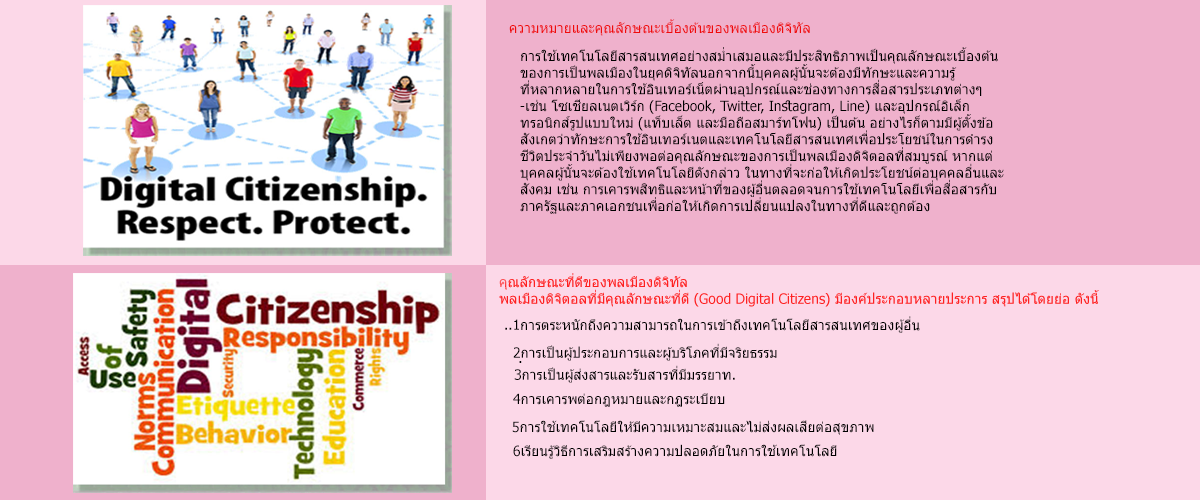
<style>
.page{position:relative;width:1200px;height:500px;background:#efb1cc}
.page>*{position:absolute;margin:0}
.t1{font:13.9px "Tahoma";color:#ef0c0c}
.t2{font:13.9px "Tahoma";color:#000000}
</style>
<div class="page">
<p class="t1" style="left:509px;top:19px;width:301px;height:17px">ความหมายและคุณลักษณะเบื้องต้นของพลเมืองดิจิทัล</p>
<p class="t2" style="left:520px;top:47px;width:484px;height:167px;text-align:right">การใช้เทคโนโลยีสารสนเทศอย่างสม่ำเสมอและมีประสิทธิภาพเป็นคุณลักษณะเบื้องต้น<br>ของการเป็นพลเมืองในยุคดิจิทัลนอกจากนี้บุคคลผู้นั้นจะต้องมีทักษะและความรู้<br>ที่หลากหลายในการใช้อินเทอร์เน็ตผ่านอุปกรณ์และช่องทางการสื่อสารประเภทต่างๆ<br> เช่น โซเชียลเนตเวิร์ก (Facebook, Twitter, Instagram, Line) และอุปกรณ์อิเล็ก-<br>ทรอนิกส์รูปแบบใหม่ (แท็บเล็ต และมือถือสมาร์ทโฟน) เป็นต้น อย่างไรก็ตามมีผู้ตั้งข้อ<br>สังเกตว่าทักษะการใช้อินเทอร์เนตและเทคโนโลยีสารสนเทศเพื่อประโยชน์ในการดำรง<br>ชีวิตประจำวันไม่เพียงพอต่อคุณลักษณะของการเป็นพลเมืองดิจิตอลที่สมบูรณ์ หากแต่<br>บุคคลผู้นั้นจะต้องใช้เทคโนโลยีดังกล่าว ในทางที่จะก่อให้เกิดประโยชน์ต่อบุคคลอื่นและ<br>สังคม เช่น การเคารพสิทธิและหน้าที่ของผู้อื่นตลอดจนการใช้เทคโนโลยีเพื่อสื่อสารกับ<br>ภาครัฐและภาคเอกชนเพื่อก่อให้เกิดการเปลี่ยนแปลงในทางที่ดีและถูกต้อง</p>
<p class="t2" style="left:505px;top:316px;width:415px;height:17px">1การตระหนักถึงความสามารถในการเข้าถึงเทคโนโลยีสารสนเทศของผู้อื่น..</p>
<p class="t2" style="left:513px;top:343px;width:264px;height:18px">2การเป็นผู้ประกอบการและผู้บริโภคที่มีจริยธรรม</p>
<p class="t2" style="left:514px;top:361px;width:221px;height:22px;text-align:right">. <br>.3การเป็นผู้ส่งสารและรับสารที่มีมรรยาท</p>
<p class="t2" style="left:513px;top:393px;width:212px;height:14px">4การเคารพต่อกฎหมายและกฎระเบียบ</p>
<p class="t2" style="left:512px;top:420px;width:362px;height:15px">5การใช้เทคโนโลยีให้มีความเหมาะสมและไม่ส่งผลเสียต่อสุขภาพ</p>
<p class="t2" style="left:513px;top:444px;width:324px;height:15px">6เรียนรู้วิธีการเสริมสร้างความปลอดภัยในการใช้เทคโนโลยี</p>
</div>
